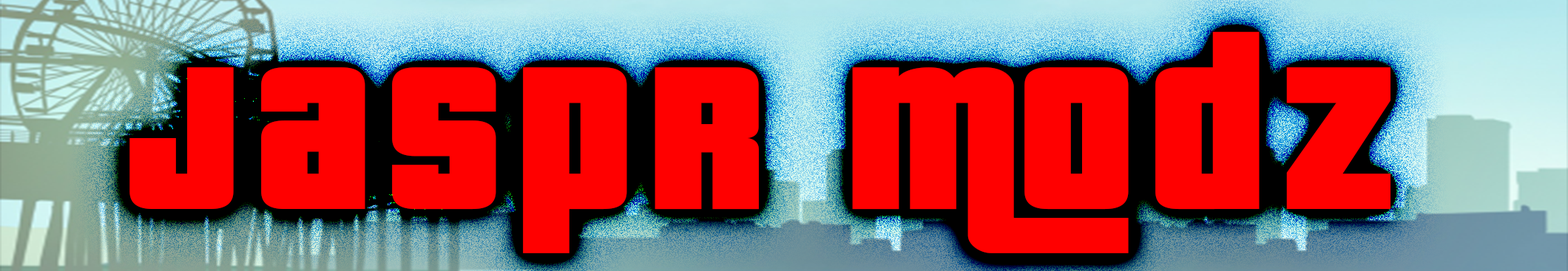
<style>
.page{position:relative;width:1568px;height:271px;background:#ff0000}
.page>*{position:absolute;margin:0}
.t1{font:221.9px "PricedownBl-Regular";letter-spacing:0.075em;color:#ff0000}
</style>
<div class="page">
<p class="t1" style="left:129px;top:32px;width:1261px;height:222px">Jaspr Modz</p>
</div>
